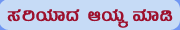
<style>
.page{position:relative;width:180px;height:30px;background:#c6dbf6}
.page>*{position:absolute;margin:0}
.t1{font:24px "Kuvempu_Eng_0005";color:#9d102d}
</style>
<div class="page">
<p class="t1" style="left:7px;top:9px;width:166px;height:19px">¸ÀjAiÀiÁzÀ DAiÀÄÌ ªÀiÁr</p>
</div>
